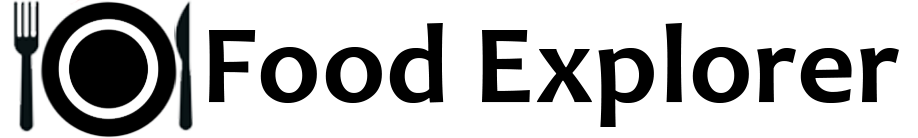
<style>
.page{position:relative;width:918px;height:138px;background:#ffffff}
.page>*{position:absolute;margin:0}
.t1{font:114px "Candara-Bold";letter-spacing:0.005em;color:#000000}
</style>
<div class="page">
<p class="t1" style="left:209px;top:23px;width:690px;height:104px">Food Explorer</p>
</div>
